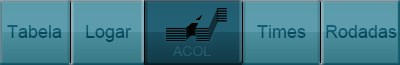
<style>
.page{position:relative;width:400px;height:65px}
.page>*{position:absolute;margin:0}
.t1{font:18px "ArialMT"}
.t2{font:18px "ArialMT";color:#0f536a}
.t3{font:14px "ArialMT";color:#235e72}
</style>
<div class="page">
<p class="t1" style="left:7px;top:25px;width:55px;height:13px">Tabela</p>
<p class="t1" style="left:86px;top:25px;width:46px;height:17px">Logar</p>
<p class="t2" style="left:257px;top:25px;width:49px;height:13px">Times</p>
<p class="t1" style="left:326px;top:25px;width:71px;height:13px">Rodadas</p>
<p class="t3" style="left:173px;top:46px;width:38px;height:10px">ACOL</p>
</div>
